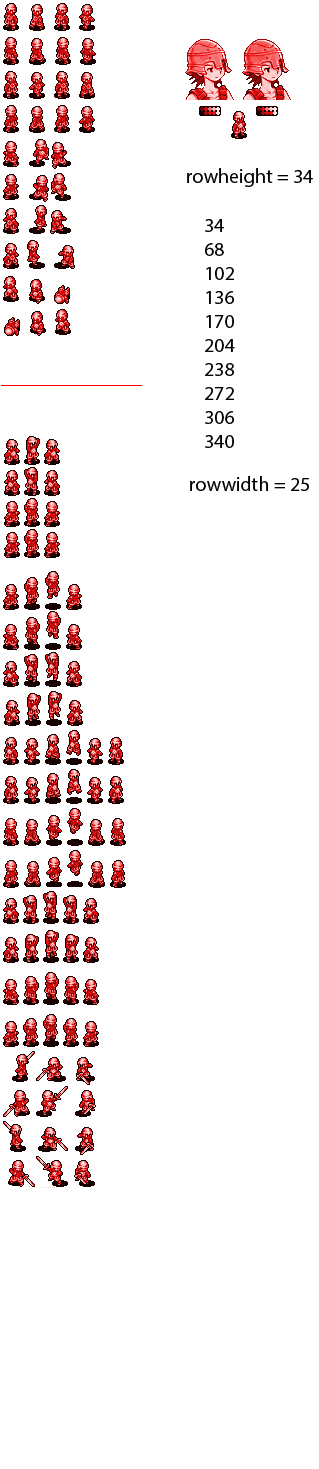
<style>
.page{position:relative;width:319px;height:1469px;background:#ffffff}
.page>*{position:absolute;margin:0}
.t1{font:20px "MyriadPro-Regular";color:#000000}
</style>
<div class="page">
<p class="t1" style="left:187px;top:168px;width:126px;height:19px">rowheight = 34</p>
<p class="t1" style="left:205px;top:219px;width:30px;height:229px">34<br>68<br>102<br>136<br>170<br>204<br>238<br>272<br>306<br>340</p>
<p class="t1" style="left:190px;top:476px;width:119px;height:15px">rowwidth = 25</p>
</div>
